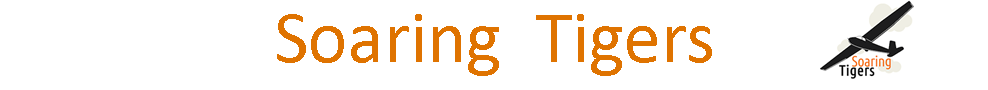
<style>
.page{position:relative;width:988px;height:90px;background:#ffffff}
.page>*{position:absolute;margin:0}
.t1{font:75px "Calibri";color:#df7300}
</style>
<div class="page">
<p class="t1" style="left:277px;top:14px;width:435px;height:62px">Soaring  Tigers</p>
</div>
